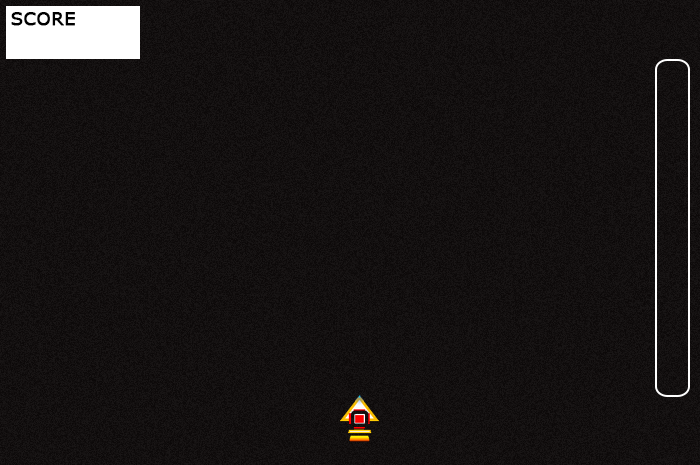
<style>
.page{position:relative;width:700px;height:465px}
.page>*{position:absolute;margin:0}
.t1{font:18px "Verdana";color:#000000;font-weight:bold}
</style>
<div class="page">
<p class="t1" style="left:11px;top:12px;width:64px;height:14px">SCORE</p>
</div>
